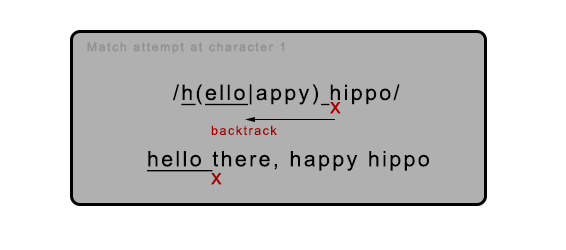
<style>
.page{position:relative;width:566px;height:250px;background:#ffffff}
.page>*{position:absolute;margin:0}
.t1{font:12.1px "ArialMT";letter-spacing:0.113em;color:#929292;font-weight:bold}
.t2{font:21.3px "ArialMT";letter-spacing:0.113em;color:#000000}
.t3{font:21.3px "ArialMT";letter-spacing:0.113em;color:#000000;text-decoration:underline}
.t4{font:21.3px "ArialMT";letter-spacing:0.113em;color:#a10000}
.t5{font:12.7px "ArialMT";letter-spacing:0.113em;color:#a10000}
</style>
<div class="page">
<p class="t1" style="left:87px;top:42px;width:198px;height:12px">Match attempt at character 1</p>
<p class="t2" style="left:173px;top:84px;width:227px;height:22px">/<span class="t3">h</span>(<span class="t3">ello</span>|appy) hippo/</p>
<p class="t4" style="left:330px;top:102px;width:11px;height:12px">x</p>
<p class="t5" style="left:211px;top:125px;width:66px;height:11px">backtrack</p>
<p class="t2" style="left:147px;top:151px;width:282px;height:21px"><span class="t3">hello </span>there, happy hippo</p>
<p class="t4" style="left:211px;top:173px;width:11px;height:12px">x</p>
</div>
